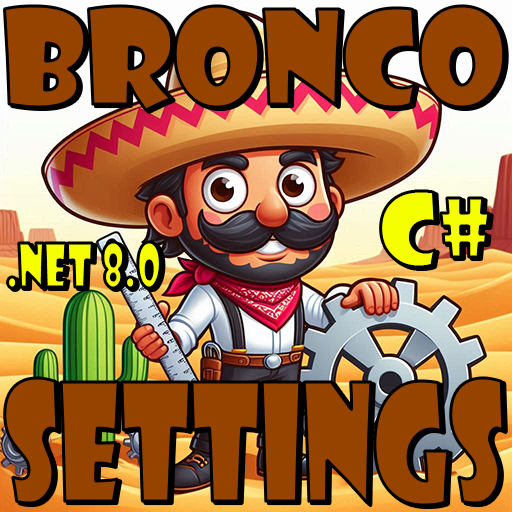
<style>
.page{position:relative;width:512px;height:512px;background:#964300}
.page>*{position:absolute;margin:0}
.t1{font:127px "ShowcardGothic-Reg";color:#964300}
.t2{font:98.2px "ShowcardGothic-Reg";color:#f6ff00}
.t3{font:57.7px "ShowcardGothic-Reg";color:#f6ff00;scale:0.72 1}
.t4{font:158px "ShowcardGothic-Reg";color:#964300;scale:0.7 1}
</style>
<div class="page">
<p class="t1" style="left:4px;top:6px;width:500px;height:104px">BRONCO</p>
<p class="t2" style="left:380px;top:191px;width:109px;height:76px">C#</p>
<p class="t3" style="left:7px;top:242px;width:154px;height:46px">.NET 8.0</p>
<p class="t4" style="left:4px;top:378px;width:499px;height:127px">SETTINGS</p>
</div>
